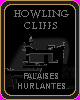
<style>
.page{position:relative;width:80px;height:100px;background:#000000}
.page>*{position:absolute;margin:0}
.t1{font:10px "TranscendRegular";color:#747474}
.t2{font:8px "Arial-BoldMT";color:#747474}
</style>
<div class="page">
<p class="t1" style="left:14px;top:10px;width:55px;height:19px;text-align:center">HOWLING<br>CLIFFS</p>
<p class="t2" style="left:18px;top:73px;width:47px;height:16px;text-align:center">FALAISES<br>HURLANTES</p>
</div>
